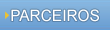
<style>
.page{position:relative;width:110px;height:30px}
.page>*{position:absolute;margin:0}
.t1{font:15.4px "ArialMT";color:#ffffff;text-transform:uppercase}
</style>
<div class="page">
<p class="t1" style="left:11px;top:9px;width:88px;height:13px">PARCEIROS</p>
</div>
